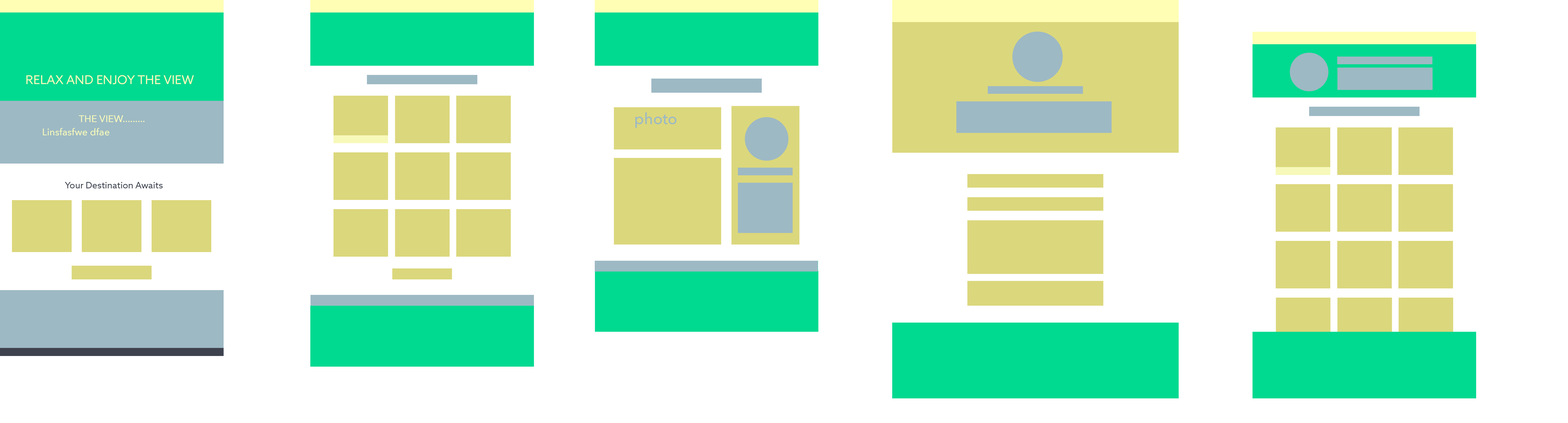
<style>
.page{position:relative;width:1568px;height:423px;background:#ffffff}
.page>*{position:absolute;margin:0}
.t1{font:12.2px "AzoSans-Regular";color:#f6f9ba}
.t2{font:15.6px "AvenirNext-Medium";color:#9db9c4}
.t3{font:9.6px "AvenirNext-Medium";color:#f6f9ba}
.t4{font:8.8px "AzoSans-Regular";color:#3d424e}
</style>
<div class="page">
<p class="t1" style="left:26px;top:75px;width:168px;height:9px">RELAX AND ENJOY THE VIEW</p>
<p class="t2" style="left:635px;top:112px;width:42px;height:16px">photo</p>
<p class="t3" style="left:79px;top:115px;width:66px;height:7px">THE VIEW.........</p>
<p class="t3" style="left:43px;top:128px;width:67px;height:8px">Linsfasfwe dfae</p>
<p class="t4" style="left:65px;top:182px;width:98px;height:7px">Your Destination Awaits</p>
</div>
